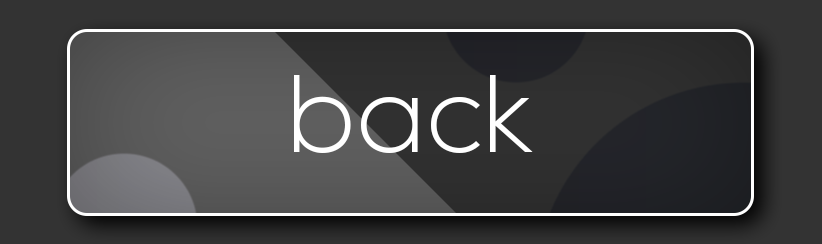
<style>
.page{position:relative;width:822px;height:244px}
.page>*{position:absolute;margin:0}
.t1{font:110.1px "NexaLight";color:#ffffff}
</style>
<div class="page">
<p class="t1" style="left:294px;top:75px;width:239px;height:78px">back</p>
</div>
